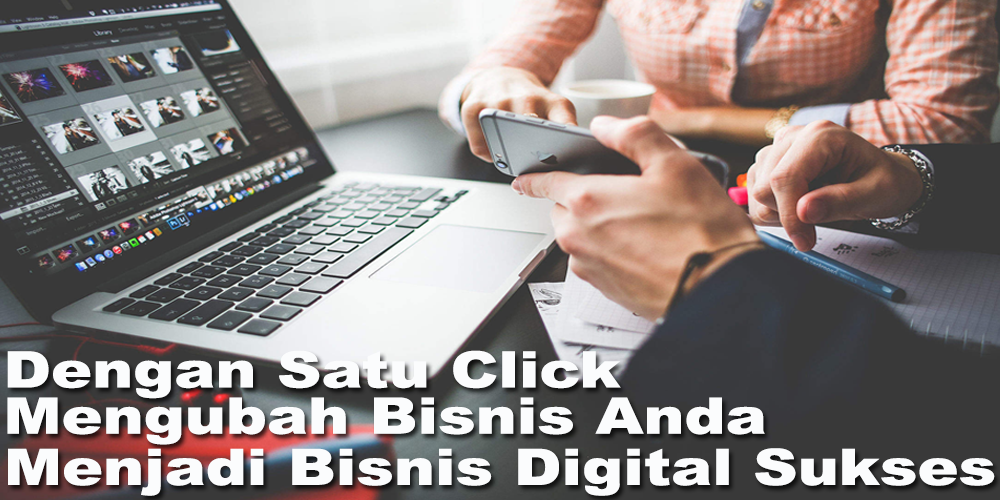
<style>
.page{position:relative;width:1000px;height:500px}
.page>*{position:absolute;margin:0}
.t1{font:50.4px "Arial-Black";color:#fbfcfd;scale:1.22 1}
</style>
<div class="page">
<p class="t1" style="left:7px;top:350px;width:614px;height:49px">Dengan Satu Click</p>
<p class="t1" style="left:7px;top:397px;width:758px;height:48px">Mengubah Bisnis Anda</p>
<p class="t1" style="left:8px;top:448px;width:987px;height:48px">Menjadi Bisnis Digital Sukses</p>
</div>
